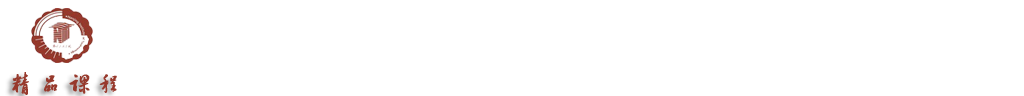
<style>
.page{position:relative;width:1024px;height:96px;background:#ffffff}
.page>*{position:absolute;margin:0}
.t1{font:24px "FZHCJW--GB1-0";letter-spacing:0.2em;color:#97392c;font-weight:bold}
</style>
<div class="page">
<p class="t1" style="left:12px;top:72px;width:105px;height:23px">精品课程</p>
</div>
